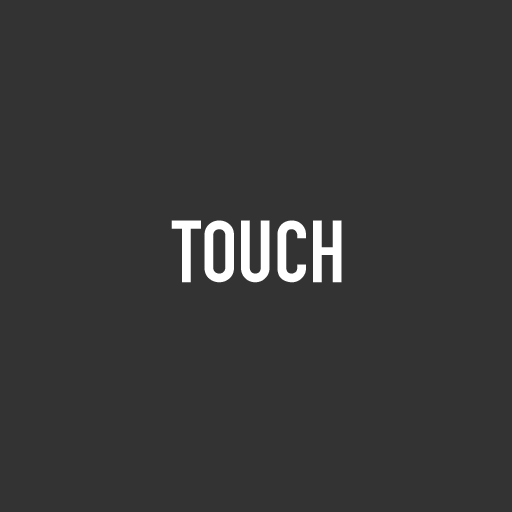
<style>
.page{position:relative;width:512px;height:512px;background:#333333}
.page>*{position:absolute;margin:0}
.t1{font:86px "DINEngschrift";color:#ffffff}
</style>
<div class="page">
<p class="t1" style="left:171px;top:220px;width:171px;height:63px">TOUCH</p>
</div>
